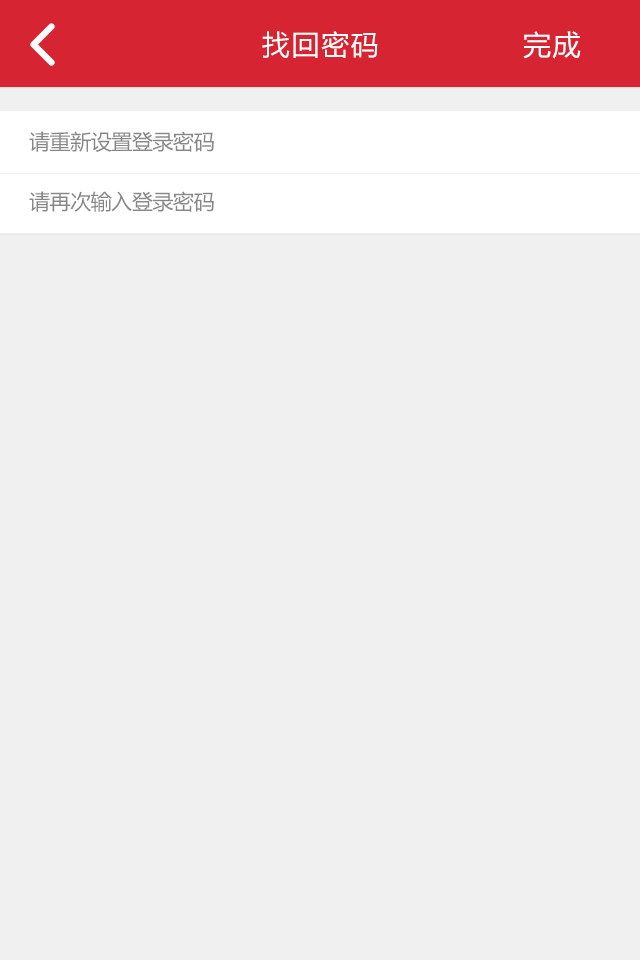
<style>
.page{position:relative;width:640px;height:960px;background:#f0f0f0}
.page>*{position:absolute;margin:0}
.t1{font:28px "MicrosoftYaHei";letter-spacing:0.06em;color:#ffffff}
.t2{font:21px "MicrosoftYaHei";letter-spacing:-0.02em;color:#878787}
</style>
<div class="page">
<p class="t1" style="left:262px;top:31px;width:116px;height:27px">找回密码</p>
<p class="t1" style="left:523px;top:31px;width:58px;height:28px">完成</p>
<p class="t2" style="left:29px;top:131px;width:185px;height:21px">请重新设置登录密码</p>
<p class="t2" style="left:29px;top:191px;width:185px;height:21px">请再次输入登录密码</p>
</div>
